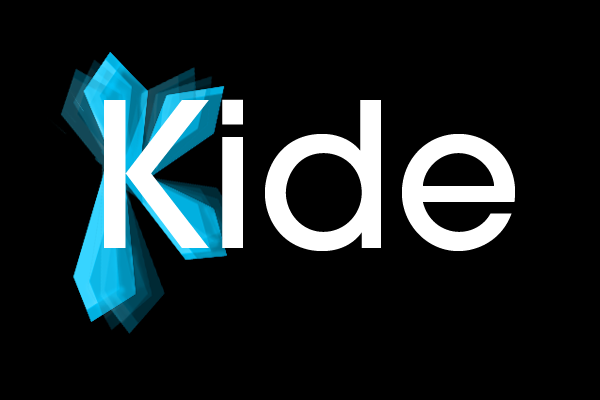
<style>
.page{position:relative;width:600px;height:400px;background:#000000}
.page>*{position:absolute;margin:0}
.t1{font:200px "AvantGarde-Medium";color:#ffffff}
</style>
<div class="page">
<p class="t1" style="left:104px;top:99px;width:411px;height:152px">Kide</p>
</div>
